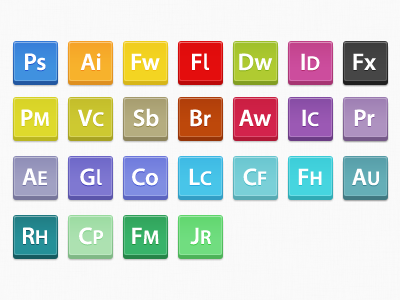
<style>
.page{position:relative;width:400px;height:300px;background:#f9f9f9}
.page>*{position:absolute;margin:0}
.t1{font:24px "MyriadPro-Semibold";color:#ffffff}
.t2{font:23px "DIN-Medium";color:#ffffff}
.t3{font:20px "MyriadPro-Semibold";color:#ffffff}
.t4{font:23px "MyriadPro-Semibold";color:#ffffff}
.t5{font:22px "DIN-Medium";color:#ffffff}
</style>
<div class="page">
<p class="t1" style="left:25px;top:53px;width:21px;height:18px">Ps</p>
<p class="t1" style="left:80px;top:53px;width:21px;height:17px">Ai</p>
<p class="t1" style="left:131px;top:53px;width:29px;height:17px">Fw</p>
<p class="t1" style="left:192px;top:53px;width:17px;height:17px">F<span class="t2">l</span></p>
<p class="t1" style="left:239px;top:53px;width:34px;height:18px">Dw</p>
<p class="t1" style="left:301px;top:53px;width:19px;height:18px">I<span class="t3">D</span></p>
<p class="t1" style="left:353px;top:53px;width:23px;height:17px">Fx</p>
<p class="t1" style="left:21px;top:109px;width:28px;height:17px">P<span class="t3">M</span></p>
<p class="t1" style="left:78px;top:109px;width:26px;height:18px">V<span class="t3">C</span></p>
<p class="t1" style="left:133px;top:108px;width:26px;height:19px">Sb</p>
<p class="t1" style="left:190px;top:109px;width:21px;height:18px">B<span class="t4">r</span></p>
<p class="t1" style="left:239px;top:109px;width:32px;height:17px">Aw</p>
<p class="t1" style="left:302px;top:109px;width:17px;height:18px">I<span class="t3">C</span></p>
<p class="t1" style="left:354px;top:109px;width:21px;height:17px">Pr</p>
<p class="t1" style="left:22px;top:168px;width:25px;height:17px">A<span class="t3">E</span></p>
<p class="t1" style="left:80px;top:168px;width:22px;height:18px">G<span class="t5">l</span></p>
<p class="t1" style="left:132px;top:168px;width:26px;height:18px">Co</p>
<p class="t1" style="left:189px;top:168px;width:23px;height:18px">L<span class="t3">C</span></p>
<p class="t1" style="left:243px;top:168px;width:24px;height:18px">C<span class="t3">F</span></p>
<p class="t1" style="left:298px;top:168px;width:24px;height:17px">F<span class="t3">H</span></p>
<p class="t1" style="left:352px;top:168px;width:27px;height:18px">A<span class="t3">U</span></p>
<p class="t1" style="left:23px;top:227px;width:24px;height:17px">R<span class="t3">H</span></p>
<p class="t1" style="left:79px;top:227px;width:24px;height:18px">C<span class="t3">P</span></p>
<p class="t1" style="left:132px;top:227px;width:27px;height:17px">F<span class="t3">M</span></p>
<p class="t1" style="left:190px;top:227px;width:21px;height:18px">J<span class="t3">R</span></p>
</div>
